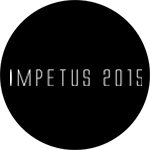
<style>
.page{position:relative;width:150px;height:150px;background:#000000}
.page>*{position:absolute;margin:0}
.t1{font:22px "AlienLeagueExpanded";color:#ffffff}
</style>
<div class="page">
<p class="t1" style="left:10px;top:69px;width:132px;height:17px">Impetus 2015</p>
</div>
